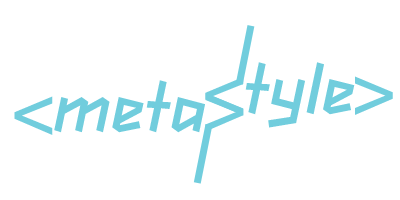
<style>
.page{position:relative;width:400px;height:200px;background:#ffffff}
.page>*{position:absolute;margin:0}
.t1{font:60px "LondonOlympics2012";color:#71cddd}
.t2{font:80px "ArialMT";color:#71cddd}
</style>
<div class="page">
<p class="t1" style="left:245px;top:62px;width:110px;height:66px">tyle</p>
<p class="t2" style="left:205px;top:77px;width:39px;height:39px">&lt;</p>
<p class="t2" style="left:355px;top:76px;width:38px;height:39px">&gt;</p>
<p class="t1" style="left:54px;top:80px;width:151px;height:53px">meta</p>
<p class="t2" style="left:14px;top:96px;width:39px;height:39px">&lt;</p>
<p class="t2" style="left:205px;top:93px;width:39px;height:39px">&gt;</p>
</div>
